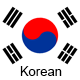
<style>
.page{position:relative;width:80px;height:80px;background:#ffffff}
.page>*{position:absolute;margin:0}
.t1{font:12.5px "ArialMT";letter-spacing:0.025em;color:#000000}
</style>
<div class="page">
<p class="t1" style="left:20px;top:66px;width:42px;height:10px">Korean</p>
</div>
